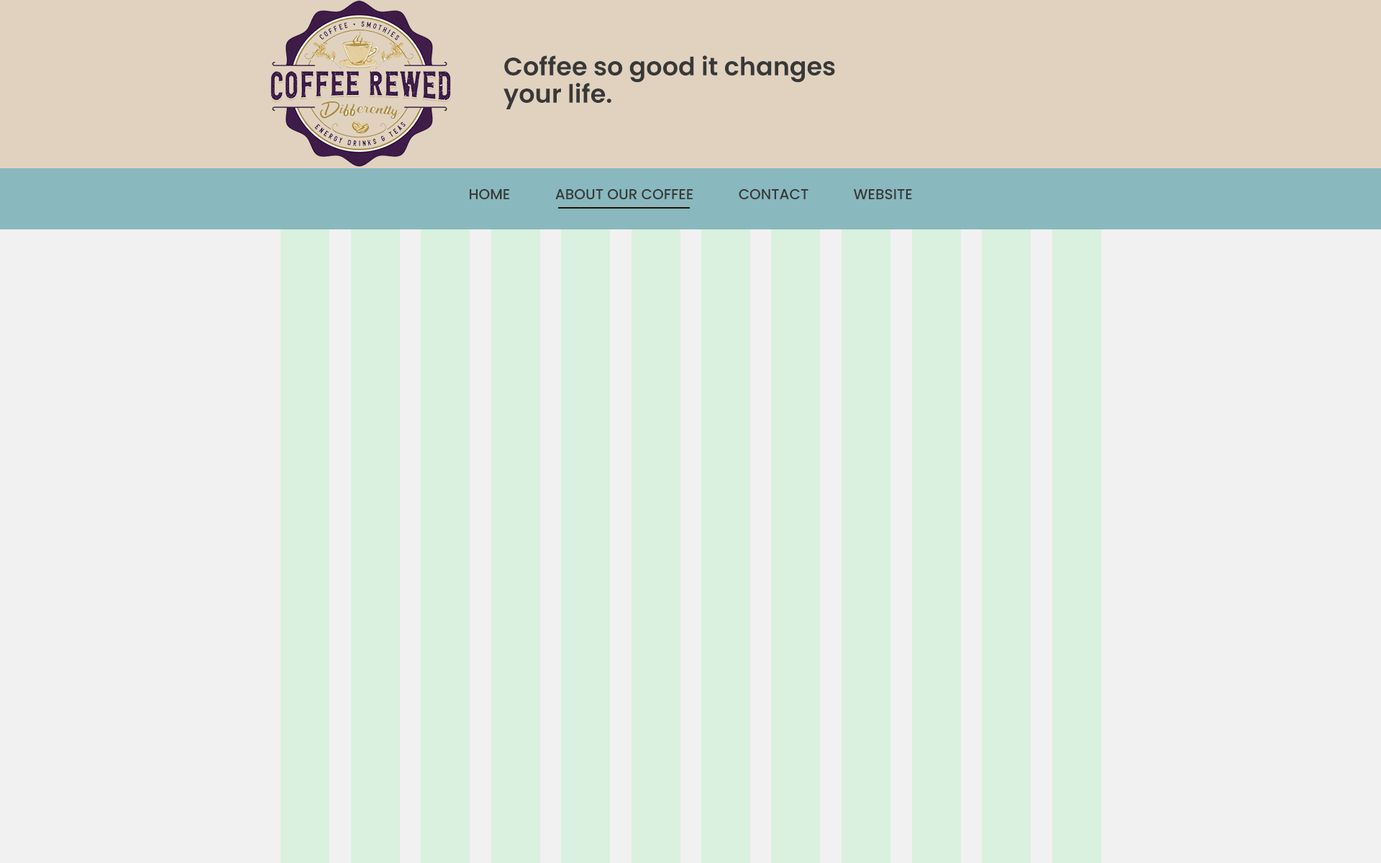
<style>
.page{position:relative;width:1381px;height:863px;background:#f1f1f1}
.page>*{position:absolute;margin:0}
.t1{font:25.2px/26.6px "Poppins-SemiBold";color:#383838}
.t2{font:14.4px "Poppins-Medium";color:#383838}
</style>
<div class="page">
<p class="t1" style="left:504px;top:55px;width:331px;height:54px">Coffee so good it changes <br>your life.</p>
<p class="t2" style="left:470px;top:189px;width:442px;height:11px">HOME            ABOUT OUR COFFEE            CONTACT            WEBSITE</p>
</div>
